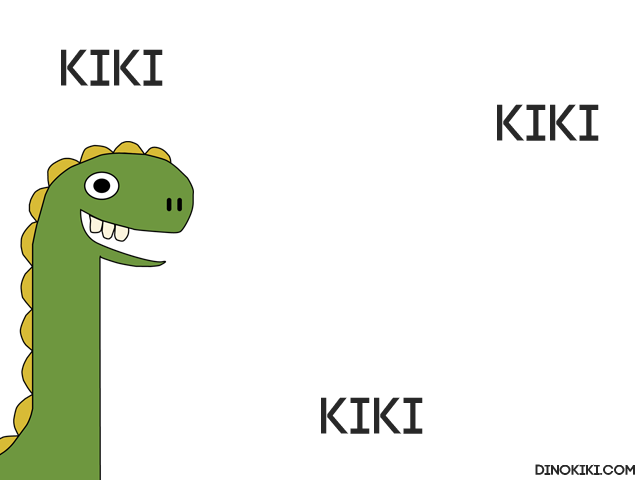
<style>
.page{position:relative;width:640px;height:480px;background:#ffffff}
.page>*{position:absolute;margin:0}
.t1{font:90px "Code-Pro-Demo";letter-spacing:-0.01em;color:#282828}
.t2{font:25px "Code-Pro-Demo";letter-spacing:-0.01em;color:#282828}
</style>
<div class="page">
<p class="t1" style="left:61px;top:49px;width:102px;height:37px">kiki</p>
<p class="t1" style="left:497px;top:104px;width:102px;height:37px">kiki</p>
<p class="t1" style="left:321px;top:397px;width:102px;height:37px">kiki</p>
<p class="t2" style="left:535px;top:464px;width:100px;height:11px">dinokiki.com</p>
</div>
